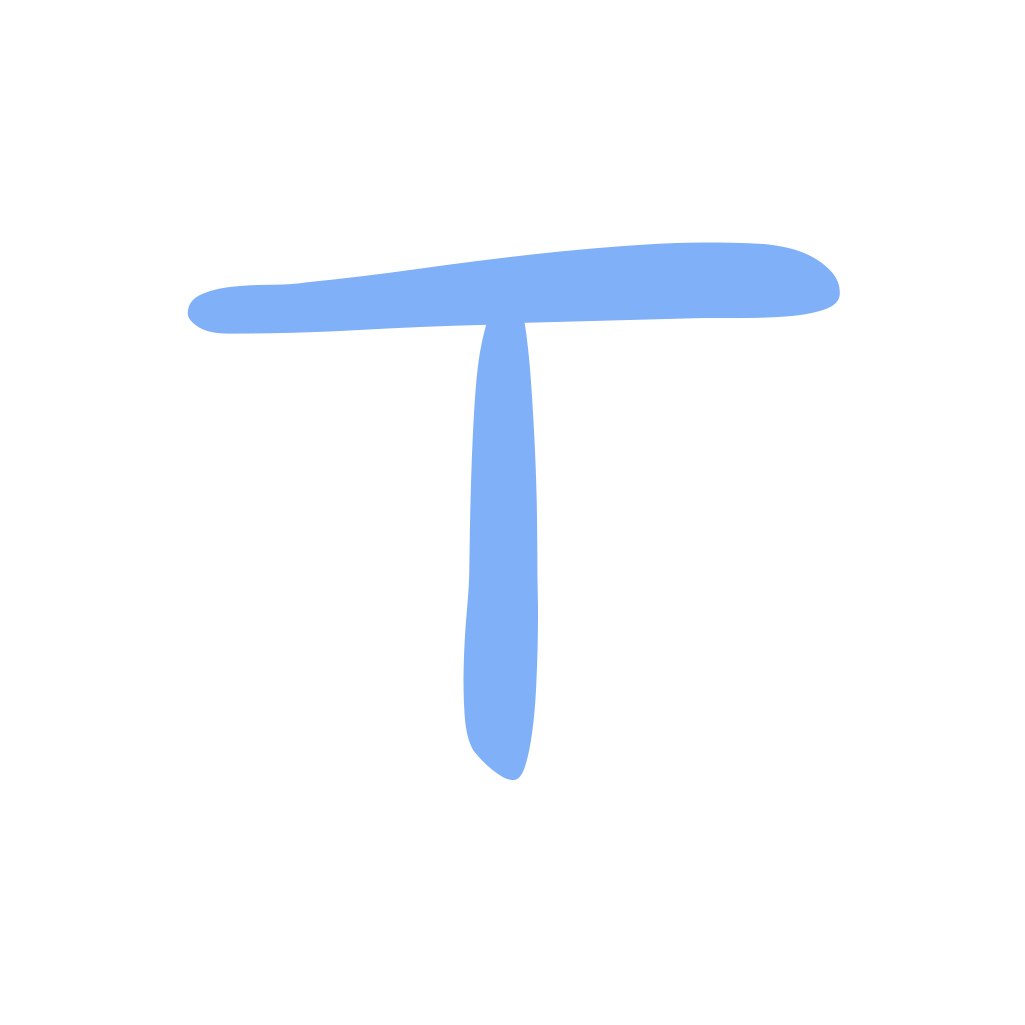
<style>
.page{position:relative;width:1025px;height:1025px;background:#ffffff}
.page>*{position:absolute;margin:0}
.t1{font:800px "RemachineScriptPersonalUse";color:#80b0f8}
</style>
<div class="page">
<p class="t1" style="left:187px;top:242px;width:653px;height:538px">T</p>
</div>
